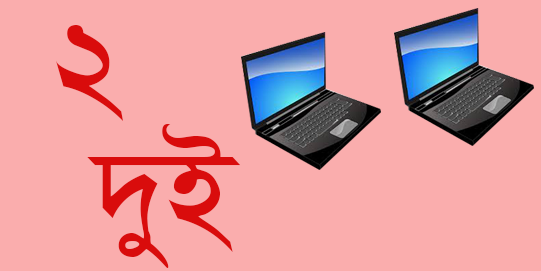
<style>
.page{position:relative;width:541px;height:271px;background:#faadad}
.page>*{position:absolute;margin:0}
.t1{font:150px "SutonnyMJ";color:#d90c0c}
</style>
<div class="page">
<p class="t1" style="left:56px;top:25px;width:67px;height:96px">2</p>
<p class="t1" style="left:87px;top:124px;width:154px;height:144px">`yB</p>
</div>
